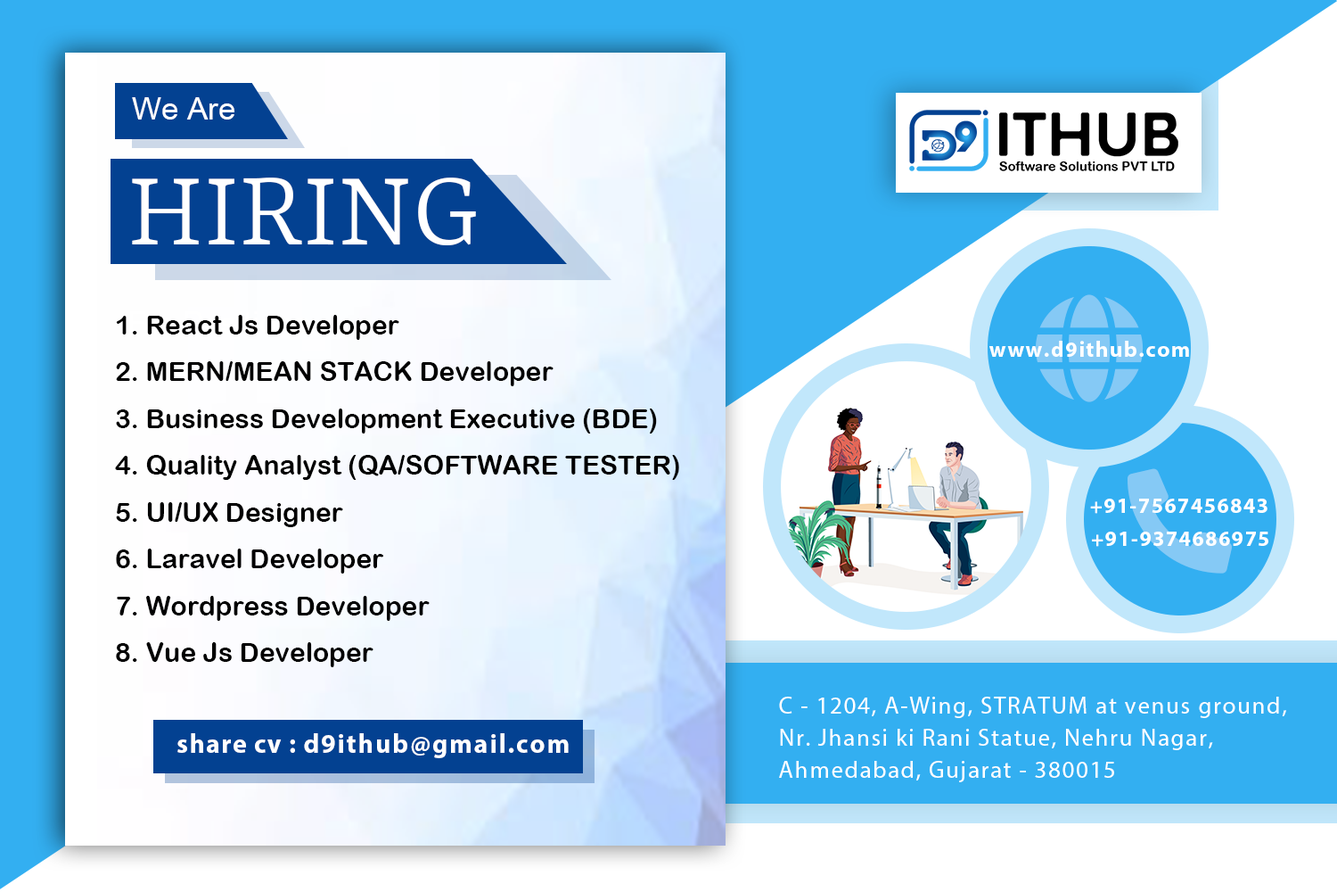
<style>
.page{position:relative;width:1337px;height:892px;background:#ffffff}
.page>*{position:absolute;margin:0}
.t1{font:31.2px "ArialMT";color:#ffffff}
.t2{font:115.9px "Rasa-Light";color:#ffffff}
.t3{font:26.7px "ArialRoundedMTBold";color:#000000}
.t4{font:22.1px "MyriadPro-Bold";letter-spacing:0.06em;color:#ffffff}
.t5{font:21.4px "MyriadPro-Bold";letter-spacing:0.06em;color:#ffffff}
.t6{font:24.1px/32.1px "MyriadPro-Regular";letter-spacing:0.06em;color:#ffffff}
.t7{font:26.7px "MyriadPro-Bold";letter-spacing:0.06em;color:#ffffff}
.t8{font:26.7px "MyriadPro-Bold";letter-spacing:0.04em;color:#ffffff}
</style>
<div class="page">
<p class="t1" style="left:132px;top:97px;width:102px;height:22px">We Are</p>
<p class="t2" style="left:132px;top:177px;width:344px;height:68px">HIRING</p>
<p class="t3" style="left:115px;top:315px;width:564px;height:352px">1. React Js Developer<br>2. MERN/MEAN STACK Developer<br>3. Business Development Executive (BDE)<br>4. Quality Analyst (QA/SOFTWARE TESTER)<br>5. UI/UX Designer <br>6. Laravel Developer<br>7. Wordpress Developer <br>8. Vue Js Developer</p>
<p class="t4" style="left:990px;top:341px;width:199px;height:16px">www.d9ithub.com</p>
<p class="t5" style="left:1090px;top:498px;width:178px;height:16px">+91-7567456843</p>
<p class="t5" style="left:1092px;top:531px;width:177px;height:16px">+91-9374686975</p>
<p class="t6" style="left:779px;top:696px;width:508px;height:86px">C - 1204, A-Wing, STRATUM at venus ground, <br>Nr. Jhansi ki Rani Statue, Nehru Nagar, <br>Ahmedabad, Gujarat - 380015</p>
<p class="t7" style="left:177px;top:733px;width:392px;height:25px"><span class="t8">share cv : </span>d9ithub@gmail.com</p>
</div>
